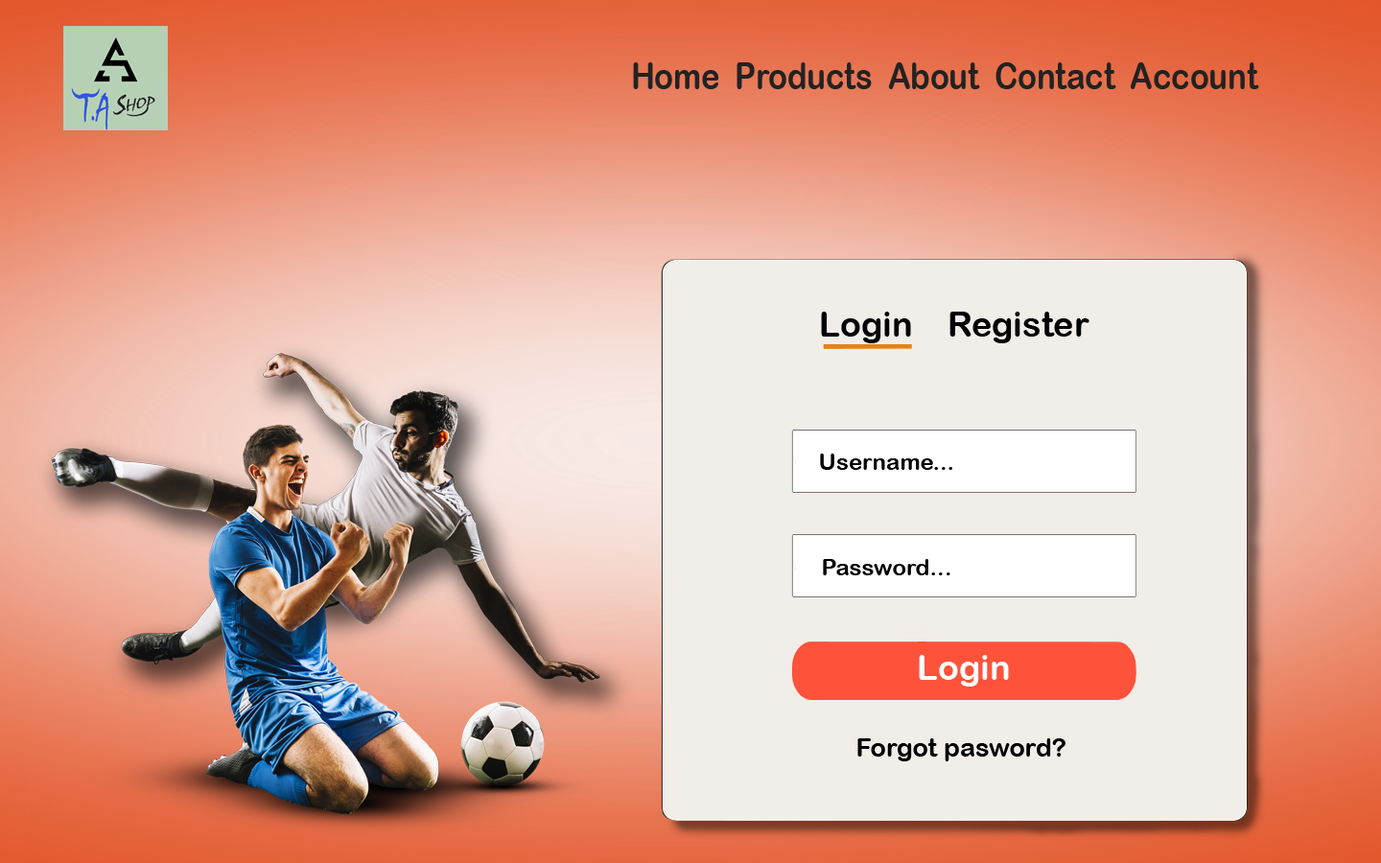
<style>
.page{position:relative;width:1381px;height:863px;background:#f1eee9}
.page>*{position:absolute;margin:0}
.t1{font:37.5px "ArialRoundedMTBold";color:#232222;scale:0.83 1}
.t2{font:34.5px "ArialRoundedMTBold";color:#000000}
.t3{font:23px "ArialRoundedMTBold";color:#000000}
.t4{font:34.5px "ArialRoundedMTBold";color:#ffffff}
.t5{font:25.9px "ArialRoundedMTBold";color:#000000}
</style>
<div class="page">
<p class="t1" style="left:633px;top:62px;width:626px;height:27px">Home  Products  About  Contact  Account</p>
<p class="t2" style="left:821px;top:312px;width:269px;height:31px">Login    Register</p>
<p class="t3" style="left:820px;top:454px;width:132px;height:16px">Username...</p>
<p class="t3" style="left:823px;top:559px;width:128px;height:17px">Password...</p>
<p class="t4" style="left:919px;top:655px;width:90px;height:32px">Login</p>
<p class="t5" style="left:858px;top:739px;width:208px;height:23px">Forgot pasword?</p>
</div>
